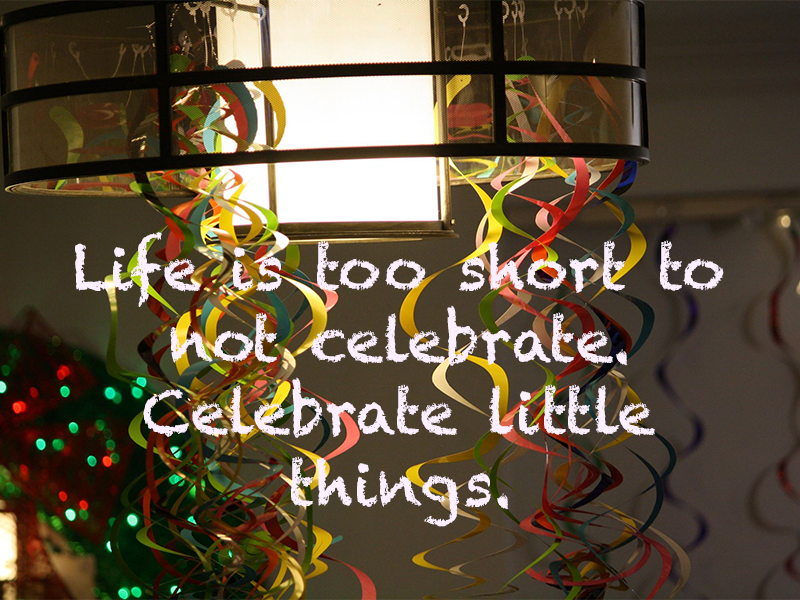
<style>
.page{position:relative;width:800px;height:600px}
.page>*{position:absolute;margin:0}
.t1{font:60px "Chalkduster";color:#fcf0ff}
</style>
<div class="page">
<p class="t1" style="left:75px;top:232px;width:649px;height:295px;text-align:center">Life is too short to not celebrate. <br>Celebrate little things.</p>
</div>
